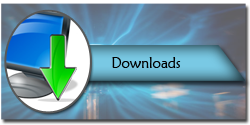
<style>
.page{position:relative;width:250px;height:125px}
.page>*{position:absolute;margin:0}
.t1{font:15px "MaiandraGD-Regular";color:#000000;scale:0.92 1}
</style>
<div class="page">
<p class="t1" style="left:112px;top:57px;width:69px;height:11px">Downloads</p>
</div>
